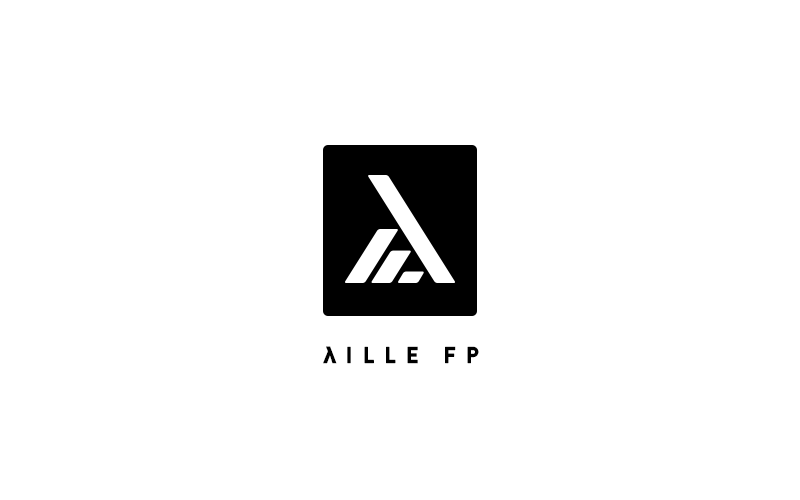
<style>
.page{position:relative;width:800px;height:500px;background:#ffffff}
.page>*{position:absolute;margin:0}
.t1{font:23.5px "BrandonGrotesque-Black";letter-spacing:0.4em;color:#000000;text-transform:uppercase}
.t2{font:22px "Verdana-Bold";letter-spacing:0.4em;color:#000000}
</style>
<div class="page">
<p class="t1" style="left:323px;top:346px;width:156px;height:18px"><span class="t2">λ</span>ille fp</p>
</div>
